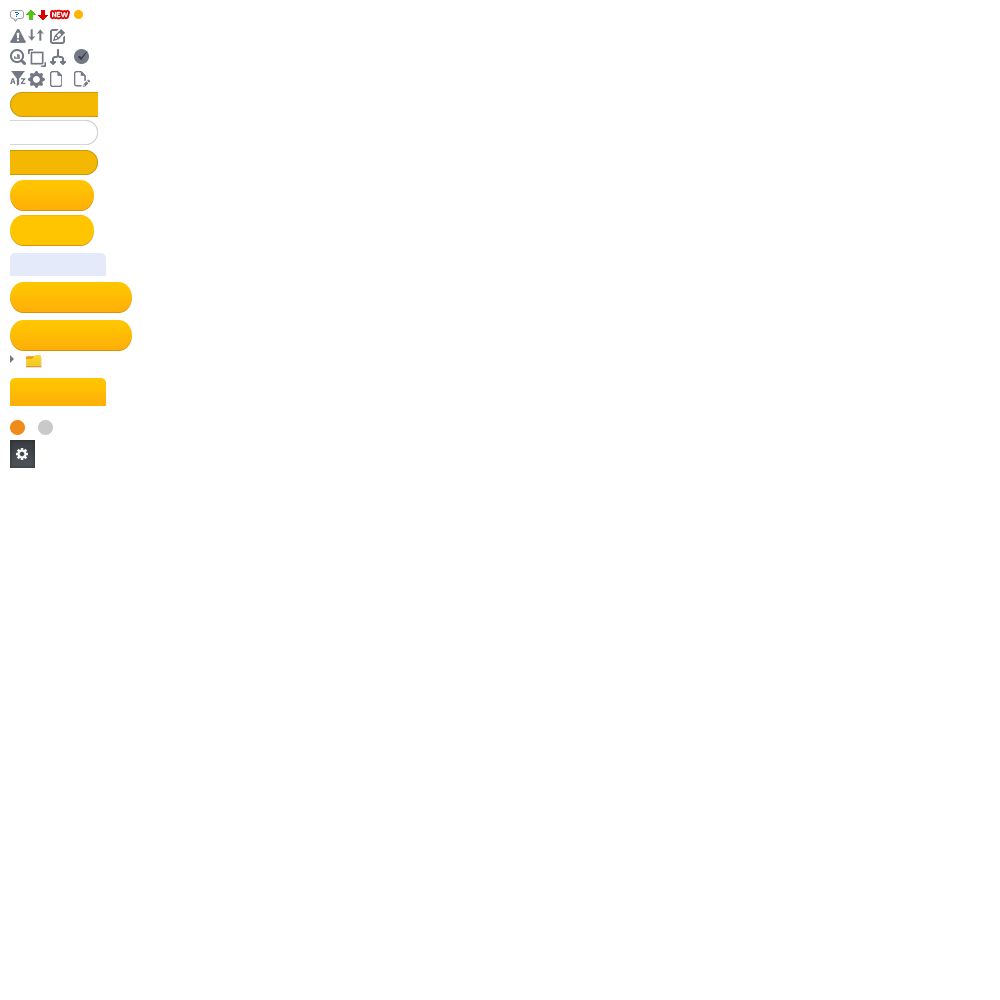
<style>
.page{position:relative;width:1000px;height:1000px;background:#ffffff}
.page>*{position:absolute;margin:0}
.t1{font:8px "KautivaCaps";text-transform:uppercase}
</style>
<div class="page">
<p class="t1" style="left:52px;top:11px;width:16px;height:7px">new</p>
</div>
